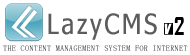
<style>
.page{position:relative;width:190px;height:55px;background:#ffffff}
.page>*{position:absolute;margin:0}
.t1{font:28px "Nina";letter-spacing:0.1em;color:#5b5c5c}
.t2{font:8px "NSimSun";letter-spacing:0.05em}
</style>
<div class="page">
<p class="t1" style="left:48px;top:13px;width:109px;height:27px">LazyCMS</p>
<p class="t2" style="left:3px;top:45px;width:185px;height:6px">THE CONTENT MANAGEMENT SYSTEM FOR INTERNET</p>
</div>
